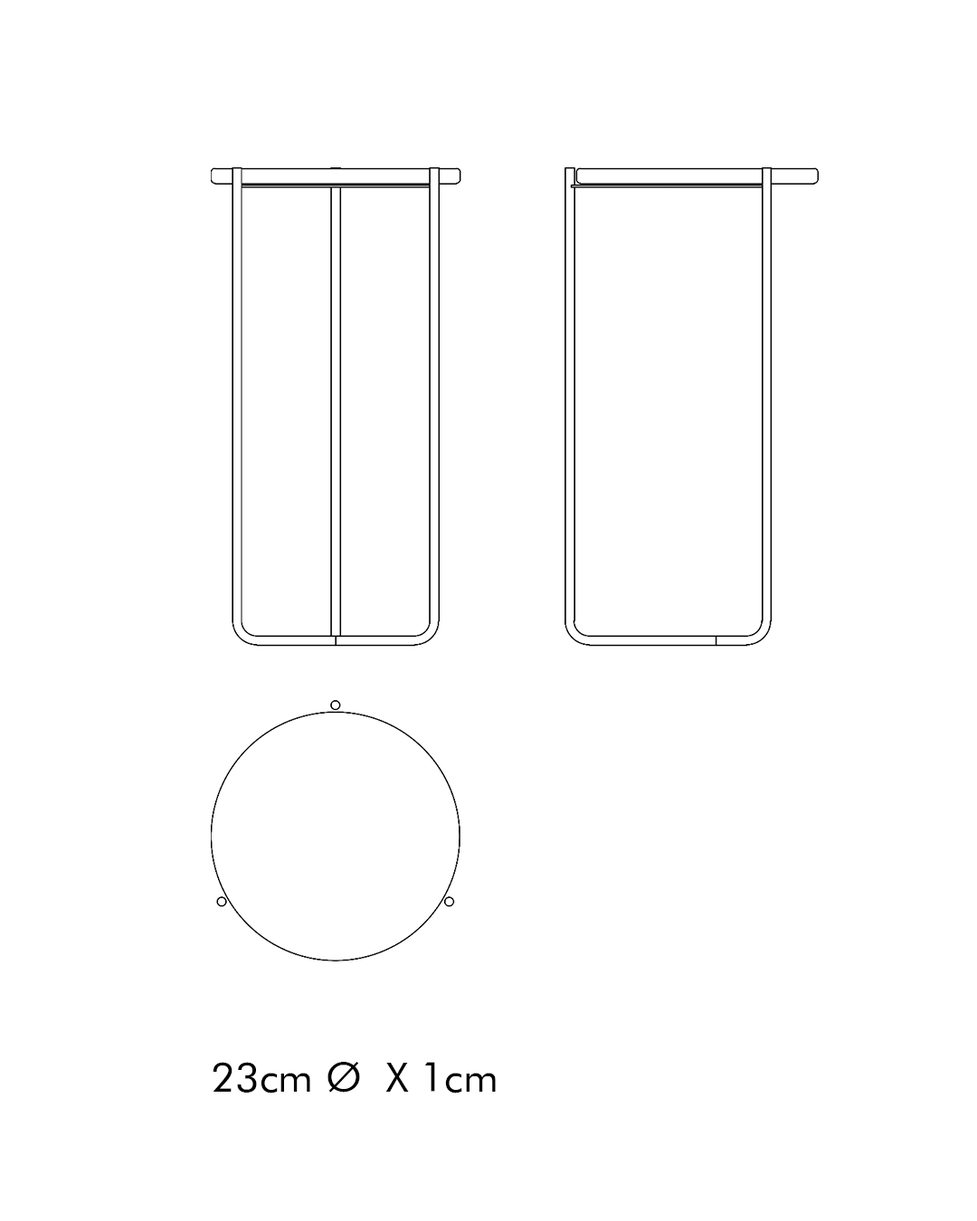
<style>
.page{position:relative;width:977px;height:1221px;background:#ffffff}
.page>*{position:absolute;margin:0}
.t1{font:41.4px "FuturaBT";color:#000000}
</style>
<div class="page">
<p class="t1" style="left:213px;top:1062px;width:283px;height:31px">23cm Ø  X 1cm</p>
</div>
